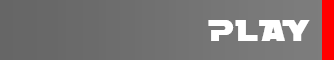
<style>
.page{position:relative;width:334px;height:60px}
.page>*{position:absolute;margin:0}
.t1{font:31px "SFDistantGalaxyAlternate";letter-spacing:0.12em;color:#ffffff}
</style>
<div class="page">
<p class="t1" style="left:208px;top:20px;width:102px;height:21px">PLAY</p>
</div>
